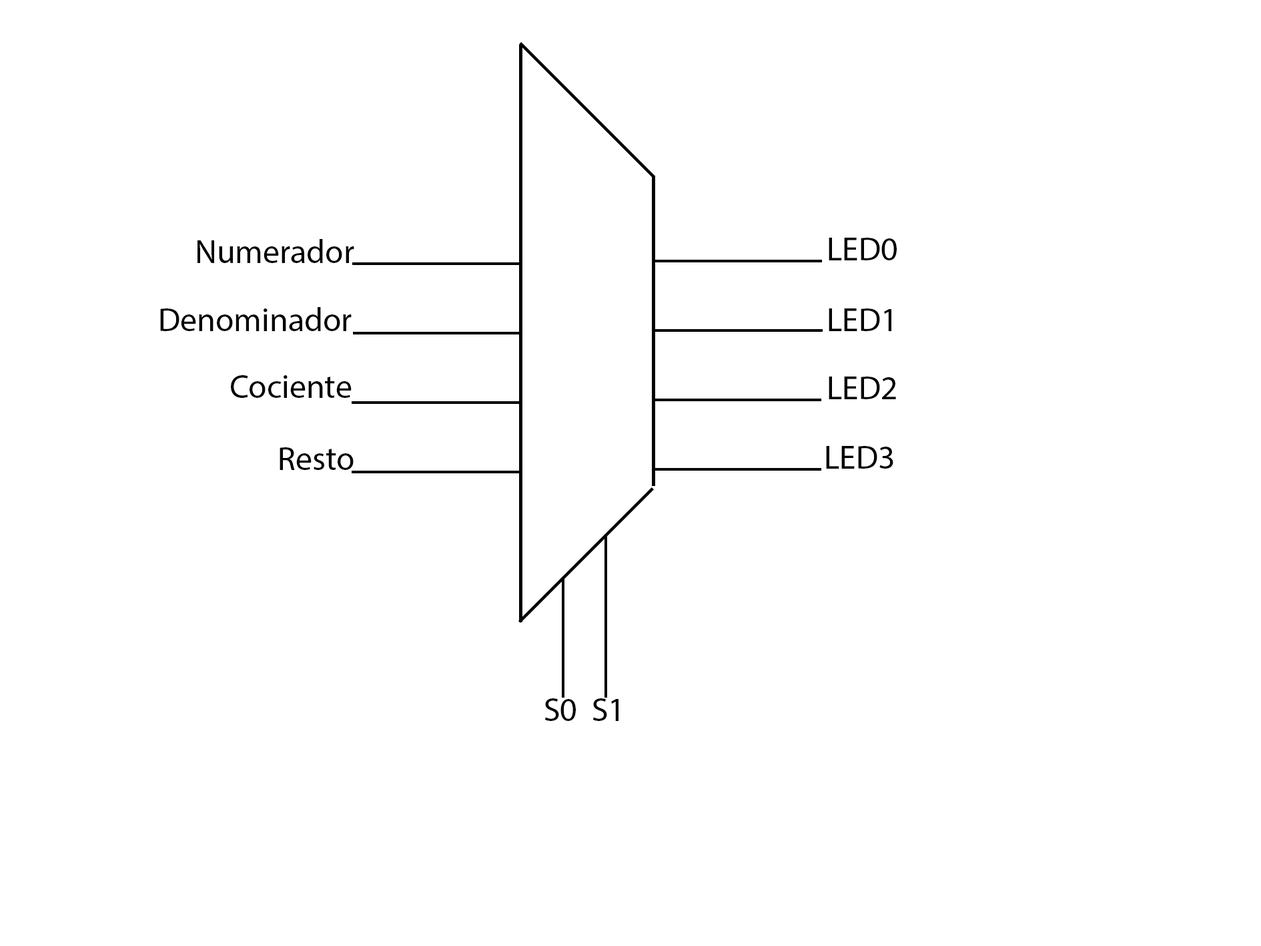
<style>
.page{position:relative;width:1261px;height:946px;background:#ffffff}
.page>*{position:absolute;margin:0}
.t1{font:33.4px "MyriadPro-Regular";color:#000000}
</style>
<div class="page">
<p class="t1" style="left:198px;top:239px;width:156px;height:24px">Numerador</p>
<p class="t1" style="left:829px;top:238px;width:68px;height:22px">LED0</p>
<p class="t1" style="left:160px;top:307px;width:192px;height:24px">Denominador</p>
<p class="t1" style="left:829px;top:308px;width:62px;height:23px">LED1</p>
<p class="t1" style="left:231px;top:375px;width:121px;height:23px">Cociente</p>
<p class="t1" style="left:829px;top:376px;width:67px;height:23px">LED2</p>
<p class="t1" style="left:280px;top:447px;width:74px;height:23px">Resto</p>
<p class="t1" style="left:826px;top:446px;width:67px;height:22px">LED3</p>
<p class="t1" style="left:544px;top:698px;width:75px;height:23px">S0 S1</p>
</div>
